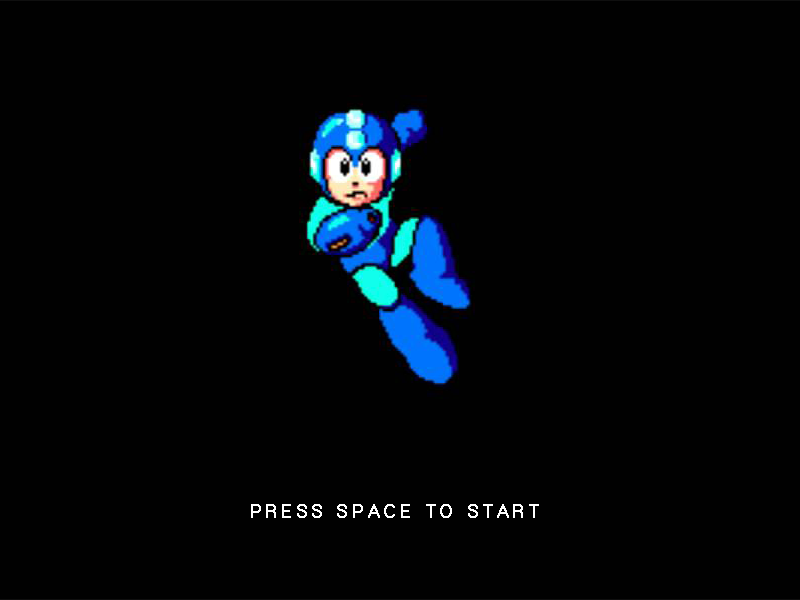
<style>
.page{position:relative;width:800px;height:600px;background:#010101}
.page>*{position:absolute;margin:0}
.t1{font:18px "Gulim";letter-spacing:0.18em;color:#ffffff;font-weight:bold}
</style>
<div class="page">
<p class="t1" style="left:251px;top:504px;width:288px;height:14px">PRESS SPACE TO START</p>
</div>
